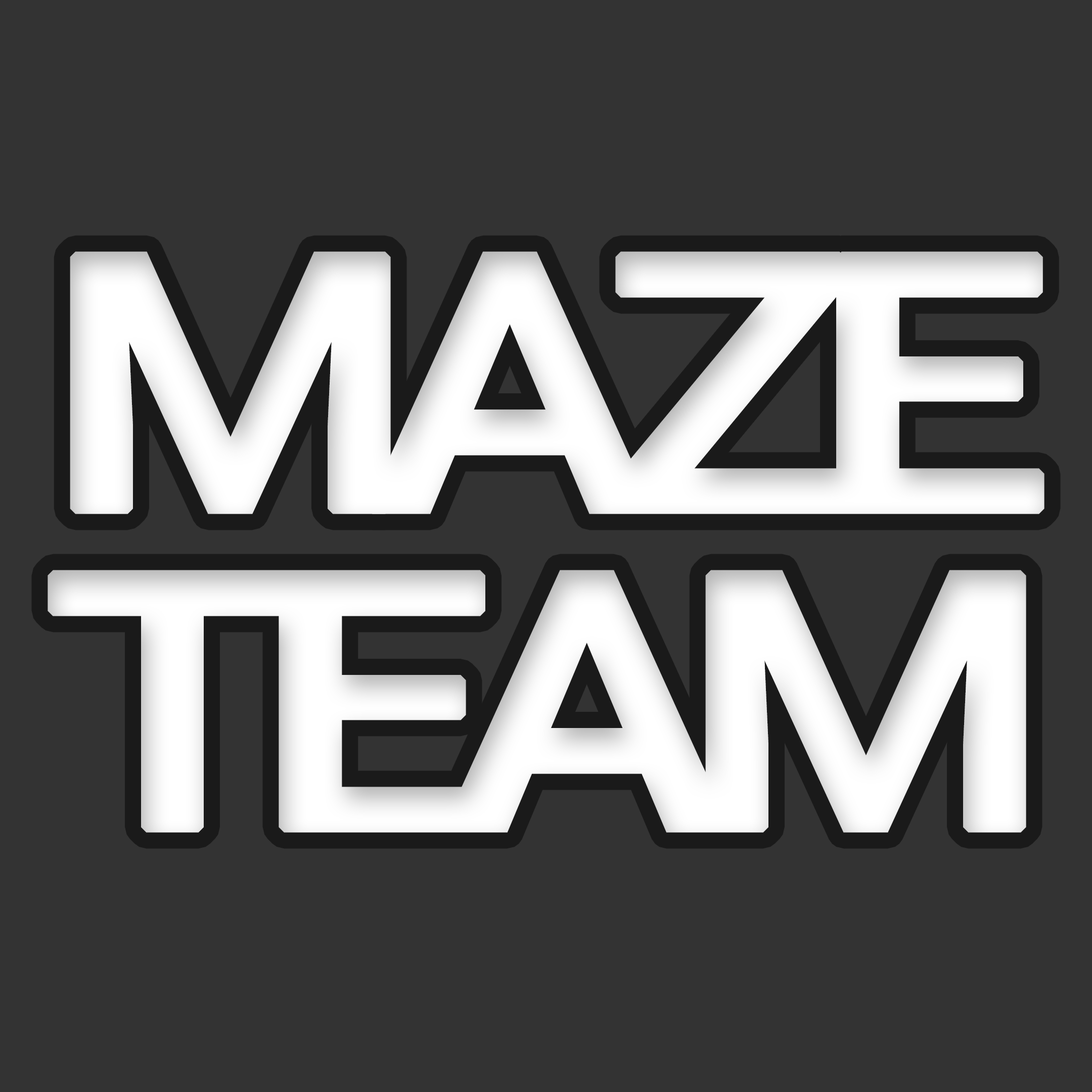
<style>
.page{position:relative;width:1092px;height:1092px;background:#333333}
.page>*{position:absolute;margin:0}
.t1{font:353.9px/318.5px "Roboto-Medium";letter-spacing:-0.14em;color:#ffffff;font-weight:bold;scale:1.2 1}
</style>
<div class="page">
<p class="t1" style="left:48px;top:251px;width:996px;height:582px;text-align:center">MAZE<br>TEAM</p>
</div>
